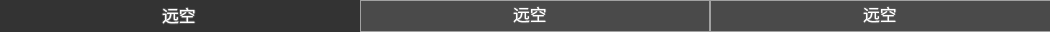
<style>
.page{position:relative;width:1050px;height:32px;background:#4a4a4a}
.page>*{position:absolute;margin:0}
.t1{font:16.7px "SourceHanSansSC-Normal";color:#ffffff}
</style>
<div class="page">
<p class="t1" style="left:513px;top:6px;width:33px;height:17px">远空</p>
<p class="t1" style="left:863px;top:6px;width:33px;height:17px">远空</p>
<p class="t1" style="left:162px;top:7px;width:33px;height:17px">远空</p>
</div>
